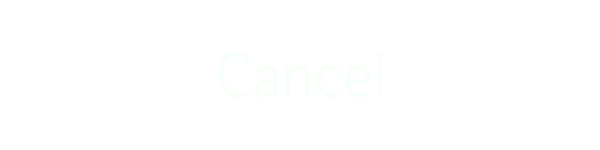
<style>
.page{position:relative;width:600px;height:150px;background:#ffffff}
.page>*{position:absolute;margin:0}
.t1{font:63px "SeN-CM";color:#f8fff9}
</style>
<div class="page">
<p class="t1" style="left:218px;top:51px;width:164px;height:47px">Cancel</p>
</div>
